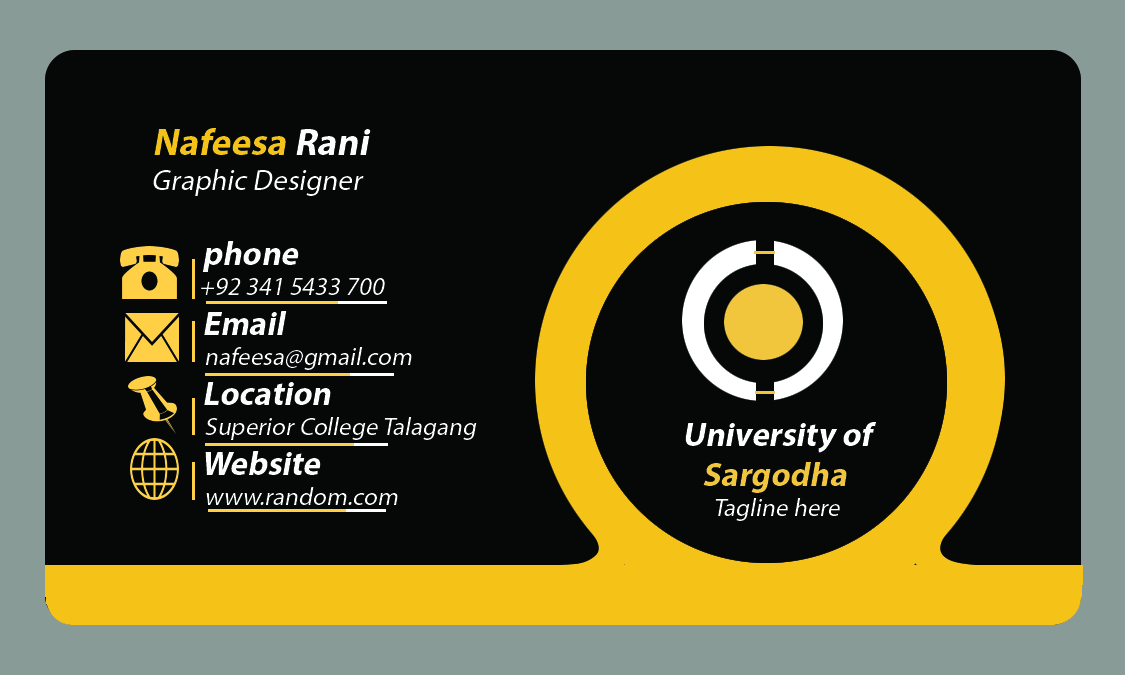
<style>
.page{position:relative;width:1125px;height:675px;background:#060808}
.page>*{position:absolute;margin:0}
.t1{font:25px "MyriadPro-Regular";color:#fbfdfc;font-style:italic}
.t2{font:37.5px "MyriadPro-Bold";color:#f5c218;font-style:italic}
.t3{font:37.5px "MyriadPro-Bold";color:#fbfdfc;font-style:italic}
.t4{font:29.2px "MyriadPro-Regular";color:#fbfdfc;font-style:italic}
.t5{font:33.3px "MyriadPro-Bold";color:#fbfdfc;font-style:italic}
.t6{font:33.3px "MyriadPro-Bold";color:#ffffff;font-style:italic}
.t7{font:33.3px "MyriadPro-Bold";color:#f1c63d;font-style:italic}
.t8{font:25px "MyriadPro-Regular";color:#ffffff;font-style:italic}
</style>
<div class="page">
<p class="t1" style="left:153px;top:128px;width:324px;height:377px"><span class="t2">     Nafeesa </span><span class="t3">Rani<br></span><span class="t4">      Graphic Designer<br><br></span><span class="t5">             phone<br></span>                +92 341 5433 700<br><span class="t5">             Email<br></span>                 nafeesa@gmail.com<br><span class="t5">             Location<br></span>                 Superior College Talagang<br><span class="t5">             Website<br></span>                 www.random.com</p>
<p class="t6" style="left:685px;top:422px;width:191px;height:99px">University of<br><span class="t7">   Sargodha<br>      </span><span class="t8">Tagline here</span></p>
</div>
